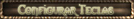
<style>
.page{position:relative;width:134px;height:19px}
.page>*{position:absolute;margin:0}
.t1{font:12px "Morpheus"}
</style>
<div class="page">
<p class="t1" style="left:18px;top:4px;width:96px;height:12px">Configurar Teclas</p>
</div>
